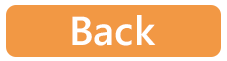
<style>
.page{position:relative;width:227px;height:61px;background:#f29844}
.page>*{position:absolute;margin:0}
.t1{font:40.5px "YuGothicUI-Semibold";color:#ffffff}
</style>
<div class="page">
<p class="t1" style="left:72px;top:15px;width:84px;height:31px">Back</p>
</div>
